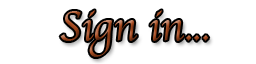
<style>
.page{position:relative;width:256px;height:64px;background:#ffffff}
.page>*{position:absolute;margin:0}
.t1{font:41.7px "Apple-Chancery"}
</style>
<div class="page">
<p class="t1" style="left:60px;top:10px;width:149px;height:47px">Sign in...</p>
</div>
